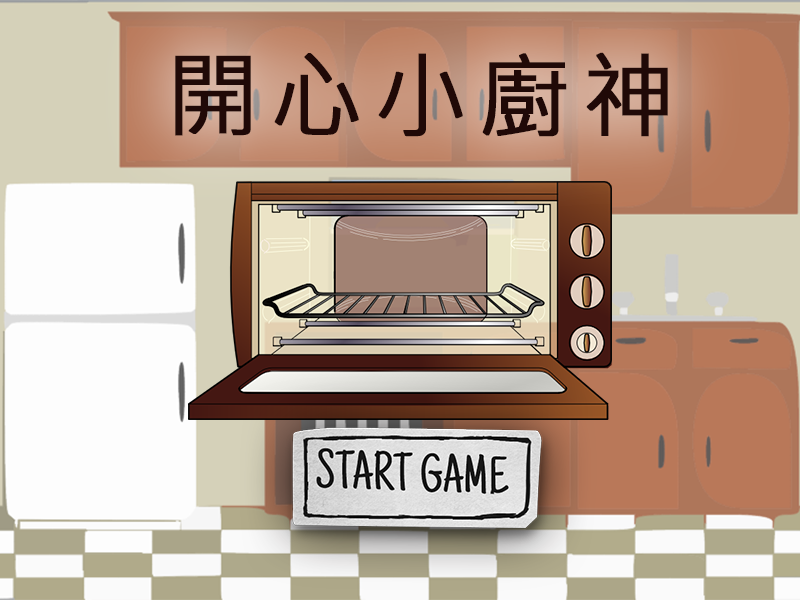
<style>
.page{position:relative;width:800px;height:600px}
.page>*{position:absolute;margin:0}
.t1{font:92.9px "MicrosoftJhengHeiRegular";letter-spacing:0.09em;color:#200907;font-weight:bold}
</style>
<div class="page">
<p class="t1" style="left:175px;top:52px;width:493px;height:85px">開心小廚神</p>
</div>
